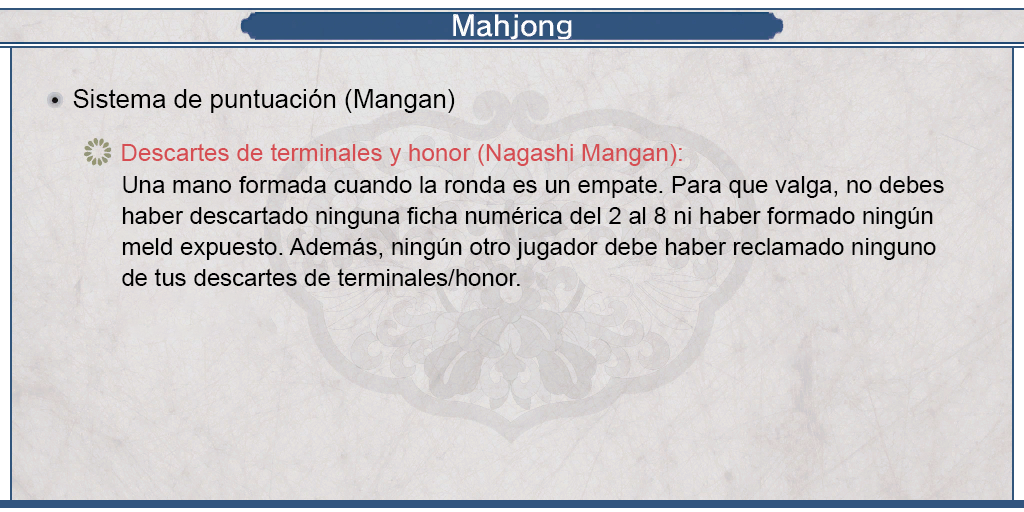
<style>
.page{position:relative;width:1024px;height:512px}
.page>*{position:absolute;margin:0}
.t1{font:26px "ArialMT";color:#000000}
.t2{font:24px "ArialMT";color:#d64d52}
.t3{font:24px/31px "ArialMT";color:#000000}
</style>
<div class="page">
<p class="t1" style="left:73px;top:89px;width:382px;height:24px">Sistema de puntuación (Mangan)</p>
<p class="t2" style="left:122px;top:143px;width:560px;height:23px">Descartes de terminales y honor (Nagashi Mangan):</p>
<p class="t3" style="left:122px;top:175px;width:822px;height:111px;text-align:justify">Una mano formada cuando la ronda es un empate. Para que valga, no debes <br>haber descartado ninguna ficha numérica del 2 al 8 ni haber formado ningún <br>meld expuesto. Además, ningún otro jugador debe haber reclamado ninguno <br>de tus descartes de terminales/honor.</p>
</div>
